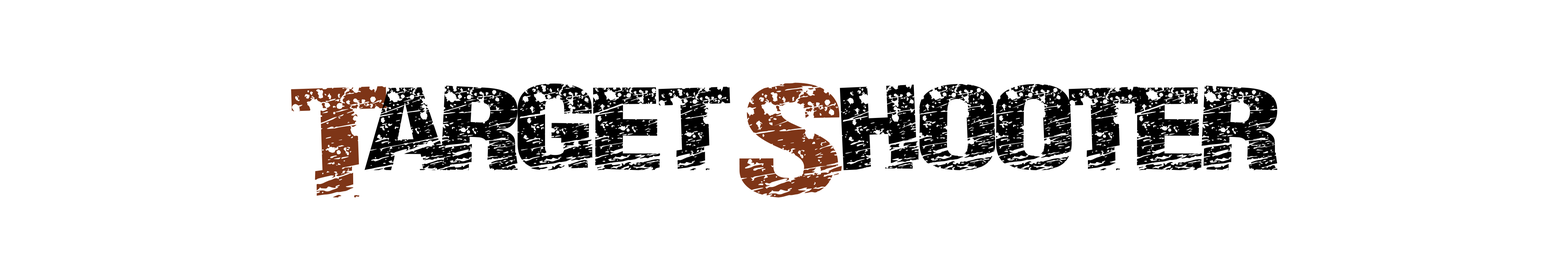
<style>
.page{position:relative;width:1568px;height:280px;background:#ffffff}
.page>*{position:absolute;margin:0}
.t1{font:112px "PaintScratch";color:#000000}
.t2{font:112px "PaintScratch";color:#7e3517}
</style>
<div class="page">
<p class="t1" style="left:291px;top:83px;width:987px;height:114px"><span class="t2">T</span>arget <span class="t2">S</span>hooter</p>
</div>
